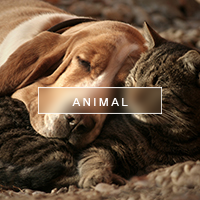
<style>
.page{position:relative;width:200px;height:200px}
.page>*{position:absolute;margin:0}
.t1{font:11.9px "IstokWeb-Regular";letter-spacing:0.2em;color:#ffffff;text-transform:uppercase}
</style>
<div class="page">
<p class="t1" style="left:72px;top:98px;width:56px;height:8px">ANIMAL</p>
</div>
